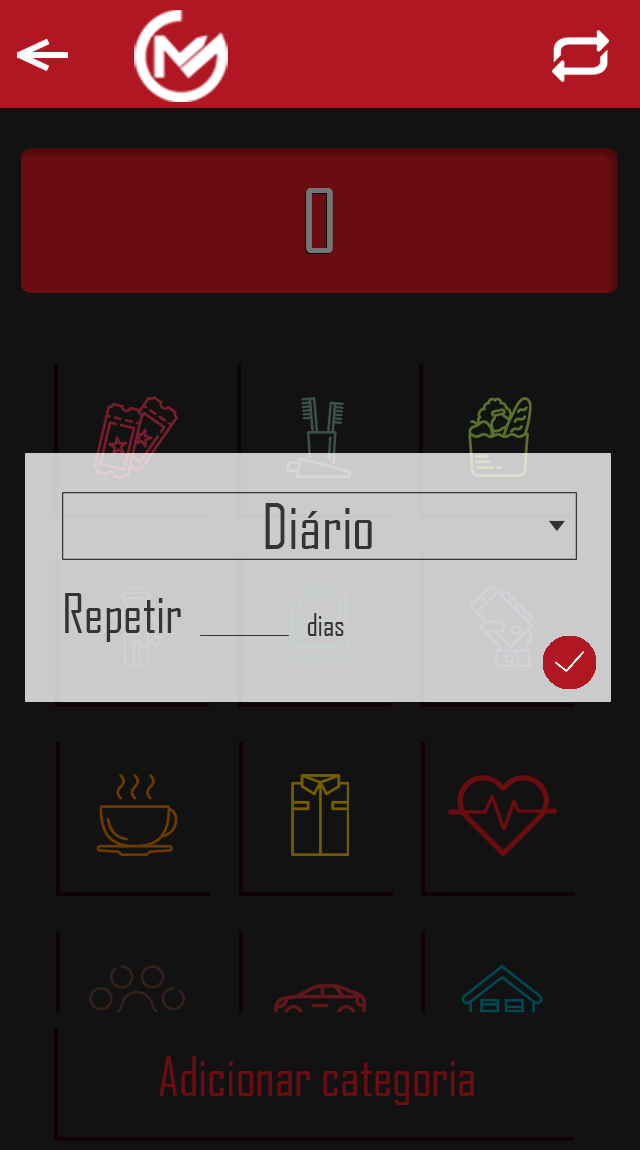
<style>
.page{position:relative;width:640px;height:1150px;background:#121212}
.page>*{position:absolute;margin:0}
.t1{font:84.7px "AgencyFB-Reg";color:#757575}
.t2{font:60.1px "AgencyFB-Reg";color:#353434}
.t3{font:52.2px "AgencyFB-Reg";color:#353434}
.t4{font:29.8px "AgencyFB-Reg";color:#353434}
.t5{font:51.7px "AgencyFB-Reg";color:#6a0d12}
</style>
<div class="page">
<p class="t1" style="left:306px;top:188px;width:27px;height:65px">0</p>
<p class="t2" style="left:265px;top:503px;width:107px;height:46px">Diário</p>
<p class="t3" style="left:65px;top:593px;width:116px;height:49px">Repetir</p>
<p class="t4" style="left:307px;top:613px;width:37px;height:23px">dias</p>
<p class="t5" style="left:159px;top:1056px;width:315px;height:49px">Adicionar categoria</p>
</div>
